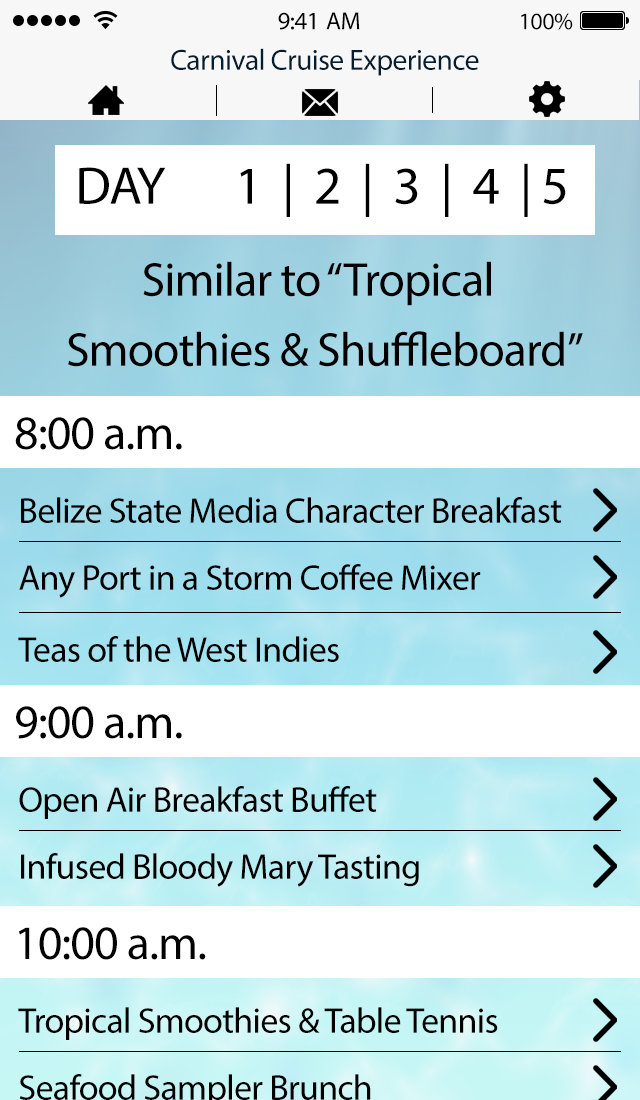
<style>
.page{position:relative;width:640px;height:1100px;background:#ffffff}
.page>*{position:absolute;margin:0}
.t1{font:25px "MyriadPro-Regular";letter-spacing:-0.02em;color:#000000}
.t2{font:24px "MyriadPro-Regular";letter-spacing:-0.02em;color:#000000}
.t3{font:29.4px "MyriadPro-Regular";letter-spacing:-0.02em;color:#061d30}
.t4{font:53.4px "MyriadPro-Regular";letter-spacing:-0.02em;color:#000000}
.t5{font:48px/70px "MyriadPro-Regular";letter-spacing:-0.02em;color:#000000}
.t6{font:48px "MyriadPro-Regular";letter-spacing:-0.02em;color:#000000}
.t7{font:36px "MyriadPro-Regular";letter-spacing:-0.02em;color:#000000}
</style>
<div class="page">
<p class="t1" style="left:278px;top:12px;width:82px;height:18px">9:41 AM</p>
<p class="t2" style="left:521px;top:13px;width:52px;height:17px">100%</p>
<p class="t3" style="left:171px;top:48px;width:308px;height:28px">Carnival Cruise Experience</p>
<p class="t4" style="left:79px;top:163px;width:487px;height:54px">DAY 1  |  2  |  3  |  4  | 5</p>
<p class="t5" style="left:68px;top:261px;width:515px;height:106px;text-align:center">Similar to “Tropical <br>Smoothies &amp; Shuffleboard”</p>
<p class="t6" style="left:15px;top:417px;width:167px;height:33px">8:00 a.m.</p>
<p class="t7" style="left:21px;top:497px;width:541px;height:26px">Belize State Media Character Breakfast</p>
<p class="t7" style="left:19px;top:564px;width:462px;height:34px">Any Port in a Storm Coffee Mixer</p>
<p class="t7" style="left:18px;top:636px;width:321px;height:26px">Teas of the West Indies</p>
<p class="t6" style="left:16px;top:706px;width:166px;height:33px">9:00 a.m.</p>
<p class="t7" style="left:19px;top:786px;width:358px;height:33px">Open Air Breakfast Buffet</p>
<p class="t7" style="left:21px;top:853px;width:398px;height:34px">Infused Bloody Mary Tasting</p>
<p class="t6" style="left:19px;top:927px;width:187px;height:33px">10:00 a.m.</p>
<p class="t7" style="left:18px;top:1007px;width:480px;height:33px">Tropical Smoothies &amp; Table Tennis</p>
</div>
